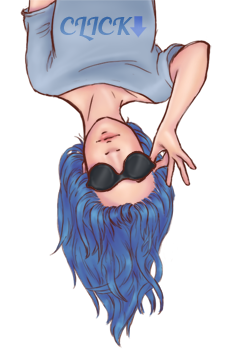
<style>
.page{position:relative;width:250px;height:361px;background:#ffffff}
.page>*{position:absolute;margin:0}
.t1{font:24.4px "BlendaScript";color:#4f7bb4}
</style>
<div class="page">
<p class="t1" style="left:60px;top:16px;width:73px;height:25px">CLICK</p>
</div>
